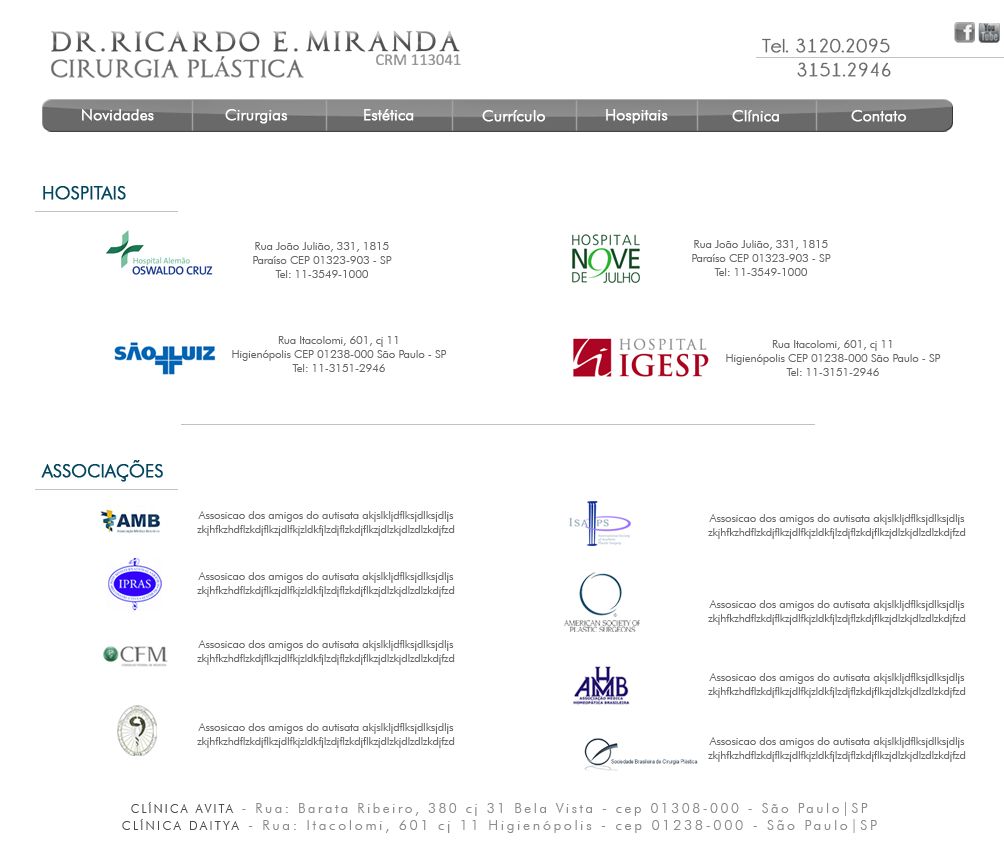
<style>
.page{position:relative;width:1004px;height:848px;background:#ffffff}
.page>*{position:absolute;margin:0}
.t1{font:19px/23.6px "Champagne&Limousines";letter-spacing:0.025em;color:#696969;font-weight:bold;scale:1.05 1}
.t2{font:16px "FuturaBT-Light";letter-spacing:-0.015em;color:#f8f8f8;font-weight:bold}
.t3{font:18px "FuturaBT-Light";letter-spacing:-0.015em;color:#02455e;font-weight:bold}
.t4{font:11.8px/13.9px "FuturaBT-Light";letter-spacing:-0.015em;color:#696969}
.t5{font:13.7px "FuturaBT-Light";letter-spacing:0.185em;color:#8d8c8c}
.t6{font:11.9px "FuturaBT-Light";letter-spacing:0.185em;color:#4b4b4b}
.t7{font:14.3px "FuturaBT-Light";letter-spacing:0.185em;color:#8d8c8c}
.t8{font:12.4px "FuturaBT-Light";letter-spacing:0.185em;color:#4b4b4b}
</style>
<div class="page">
<p class="t1" style="left:762px;top:38px;width:129px;height:39px;text-align:center">Tel. 3120.2095  <br>      3151.2946</p>
<p class="t2" style="left:82px;top:109px;width:72px;height:12px">Novidades</p>
<p class="t2" style="left:225px;top:109px;width:63px;height:15px">Cirurgias</p>
<p class="t2" style="left:364px;top:109px;width:50px;height:12px">Estética</p>
<p class="t2" style="left:482px;top:110px;width:64px;height:12px">Currículo</p>
<p class="t2" style="left:606px;top:109px;width:62px;height:15px">Hospitais</p>
<p class="t2" style="left:732px;top:110px;width:47px;height:12px">Clínica</p>
<p class="t2" style="left:851px;top:110px;width:56px;height:12px">Contato</p>
<p class="t3" style="left:43px;top:186px;width:83px;height:14px">HOSPITAIS</p>
<p class="t4" style="left:253px;top:242px;width:139px;height:36px;text-align:center">Rua João Julião, 331, 1815<br>Paraíso CEP 01323-903 - SP<br>Tel: 11-3549-1000</p>
<p class="t4" style="left:692px;top:240px;width:139px;height:36px;text-align:center">Rua João Julião, 331, 1815<br>Paraíso CEP 01323-903 - SP<br>Tel: 11-3549-1000</p>
<p class="t4" style="left:232px;top:336px;width:215px;height:36px;text-align:center">Rua Itacolomi, 601, cj 11<br>Higienópolis CEP 01238-000 São Paulo - SP<br>Tel: 11-3151-2946</p>
<p class="t4" style="left:726px;top:340px;width:215px;height:36px;text-align:center">Rua Itacolomi, 601, cj 11<br>Higienópolis CEP 01238-000 São Paulo - SP<br>Tel: 11-3151-2946</p>
<p class="t3" style="left:41px;top:460px;width:122px;height:22px">ASSOCIAÇÕES</p>
<p class="t4" style="left:197px;top:511px;width:258px;height:25px;text-align:center">Assosicao dos amigos do autisata akjslkljdflksjdlksjdljs<br>zkjhfkzhdflzkdjflkzjdlfkjzldkfjlzdjflzkdjflkzjdlzkjdlzdlzkdjfzd</p>
<p class="t4" style="left:708px;top:514px;width:258px;height:25px;text-align:center">Assosicao dos amigos do autisata akjslkljdflksjdlksjdljs<br>zkjhfkzhdflzkdjflkzjdlfkjzldkfjlzdjflzkdjflkzjdlzkjdlzdlzkdjfzd</p>
<p class="t4" style="left:197px;top:572px;width:258px;height:25px;text-align:center">Assosicao dos amigos do autisata akjslkljdflksjdlksjdljs<br>zkjhfkzhdflzkdjflkzjdlfkjzldkfjlzdjflzkdjflkzjdlzkjdlzdlzkdjfzd</p>
<p class="t4" style="left:708px;top:600px;width:258px;height:25px;text-align:center">Assosicao dos amigos do autisata akjslkljdflksjdlksjdljs<br>zkjhfkzhdflzkdjflkzjdlfkjzldkfjlzdjflzkdjflkzjdlzkjdlzdlzkdjfzd</p>
<p class="t4" style="left:197px;top:640px;width:258px;height:25px;text-align:center">Assosicao dos amigos do autisata akjslkljdflksjdlksjdljs<br>zkjhfkzhdflzkdjflkzjdlfkjzldkfjlzdjflzkdjflkzjdlzkjdlzdlzkdjfzd</p>
<p class="t4" style="left:708px;top:673px;width:258px;height:25px;text-align:center">Assosicao dos amigos do autisata akjslkljdflksjdlksjdljs<br>zkjhfkzhdflzkdjflkzjdlfkjzldkfjlzdjflzkdjflkzjdlzkjdlzdlzkdjfzd</p>
<p class="t4" style="left:197px;top:723px;width:258px;height:25px;text-align:center">Assosicao dos amigos do autisata akjslkljdflksjdlksjdljs<br>zkjhfkzhdflzkdjflkzjdlfkjzldkfjlzdjflzkdjflkzjdlzkjdlzdlzkdjfzd</p>
<p class="t4" style="left:708px;top:737px;width:258px;height:25px;text-align:center">Assosicao dos amigos do autisata akjslkljdflksjdlksjdljs<br>zkjhfkzhdflzkdjflkzjdlfkjzldkfjlzdjflzkdjflkzjdlzkjdlzdlzkdjfzd</p>
<p class="t5" style="left:131px;top:802px;width:737px;height:14px"><span class="t6">CLÍNICA AVITA</span> - Rua: Barata Ribeiro, 380 cj 31 Bela Vista - cep 01308-000 - São Paulo|SP</p>
<p class="t7" style="left:122px;top:819px;width:755px;height:14px"><span class="t8">CLÍNICA DAITYA</span> - Rua: Itacolomi, 601 cj 11 Higienópolis - cep 01238-000 - São Paulo|SP</p>
</div>
